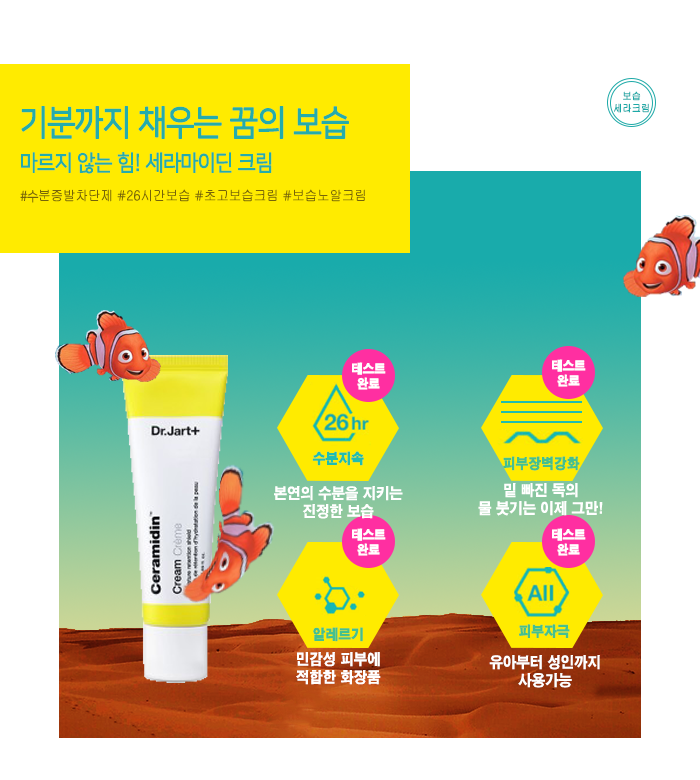
<style>
.page{position:relative;width:700px;height:780px;background:#ffffff}
.page>*{position:absolute;margin:0}
.t1{font:10.1px "Gulim";letter-spacing:-0.01em;color:#1da9a7;font-weight:bold;scale:0.9 1}
.t2{font:22px/36px "NanumSquare_acR";letter-spacing:-0.01em;color:#24acab;font-weight:bold;scale:0.9 1}
.t3{font:35px/36px "NanumSquare_acR";letter-spacing:-0.01em;color:#24acab;font-weight:bold;scale:0.9 1}
.t4{font:14px "Gulim";letter-spacing:-0.01em;color:#766409;scale:0.9 1}
.t5{font:14px "NanumSquare_acR";letter-spacing:-0.01em;color:#766409;scale:0.9 1}
.t6{font:12.5px "H2gtrE";letter-spacing:-0.01em;color:#ffffff;font-weight:bold;scale:0.9 1}
.t7{font:14px "H2gtrE";letter-spacing:-0.01em;color:#20bdaf;font-weight:bold;scale:0.9 1}
.t8{font:14px "H2gtrE";letter-spacing:-0.01em;color:#44c08f;font-weight:bold;scale:0.9 1}
.t9{font:15px "H2gtrE";letter-spacing:-0.01em;color:#ffffff;scale:0.9 1}
</style>
<div class="page">
<p class="t1" style="left:614px;top:91px;width:35px;height:22px;text-align:center">보습<br>세라크림</p>
<p class="t2" style="left:21px;top:106px;width:328px;height:68px"><span class="t3">기분까지 채우는 꿈의 보습<br></span>마르지 않는 힘! 세라마이딘 크림</p>
<p class="t4" style="left:20px;top:189px;width:345px;height:14px"><span class="t5">#수</span>분증발차단제 #26시간보습 #초고보습크림 #보습노알크림</p>
<p class="t6" style="left:352px;top:362px;width:34px;height:28px;text-align:center">테스트<br>완료</p>
<p class="t6" style="left:552px;top:359px;width:34px;height:28px;text-align:center">테스트<br>완료</p>
<p class="t7" style="left:312px;top:451px;width:52px;height:15px">수분지속</p>
<p class="t8" style="left:503px;top:456px;width:77px;height:15px">피부장벽강화</p>
<p class="t9" style="left:274px;top:486px;width:129px;height:33px;text-align:center">본연의 수분을 지키는<br>진정한 보습</p>
<p class="t9" style="left:478px;top:483px;width:125px;height:33px;text-align:center">밑 빠진 독의<br>물 붓기는 이제 그만!</p>
<p class="t6" style="left:352px;top:528px;width:34px;height:28px;text-align:center">테스트<br>완료</p>
<p class="t6" style="left:552px;top:528px;width:34px;height:28px;text-align:center">테스트<br>완료</p>
<p class="t8" style="left:313px;top:627px;width:50px;height:15px">알레르기</p>
<p class="t8" style="left:519px;top:624px;width:51px;height:14px">피부자극</p>
<p class="t9" style="left:296px;top:652px;width:85px;height:33px;text-align:center">민감성 피부에<br>적합한 화장품</p>
<p class="t9" style="left:489px;top:655px;width:111px;height:33px;text-align:center">유아부터 성인까지<br>사용가능</p>
</div>
